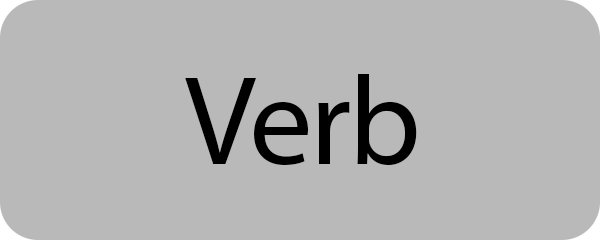
<style>
.page{position:relative;width:600px;height:240px;background:#b9b9b9}
.page>*{position:absolute;margin:0}
.t1{font:127px "MyriadPro-Regular";letter-spacing:-0.02em;color:#000000}
</style>
<div class="page">
<p class="t1" style="left:185px;top:74px;width:232px;height:92px">Verb</p>
</div>
